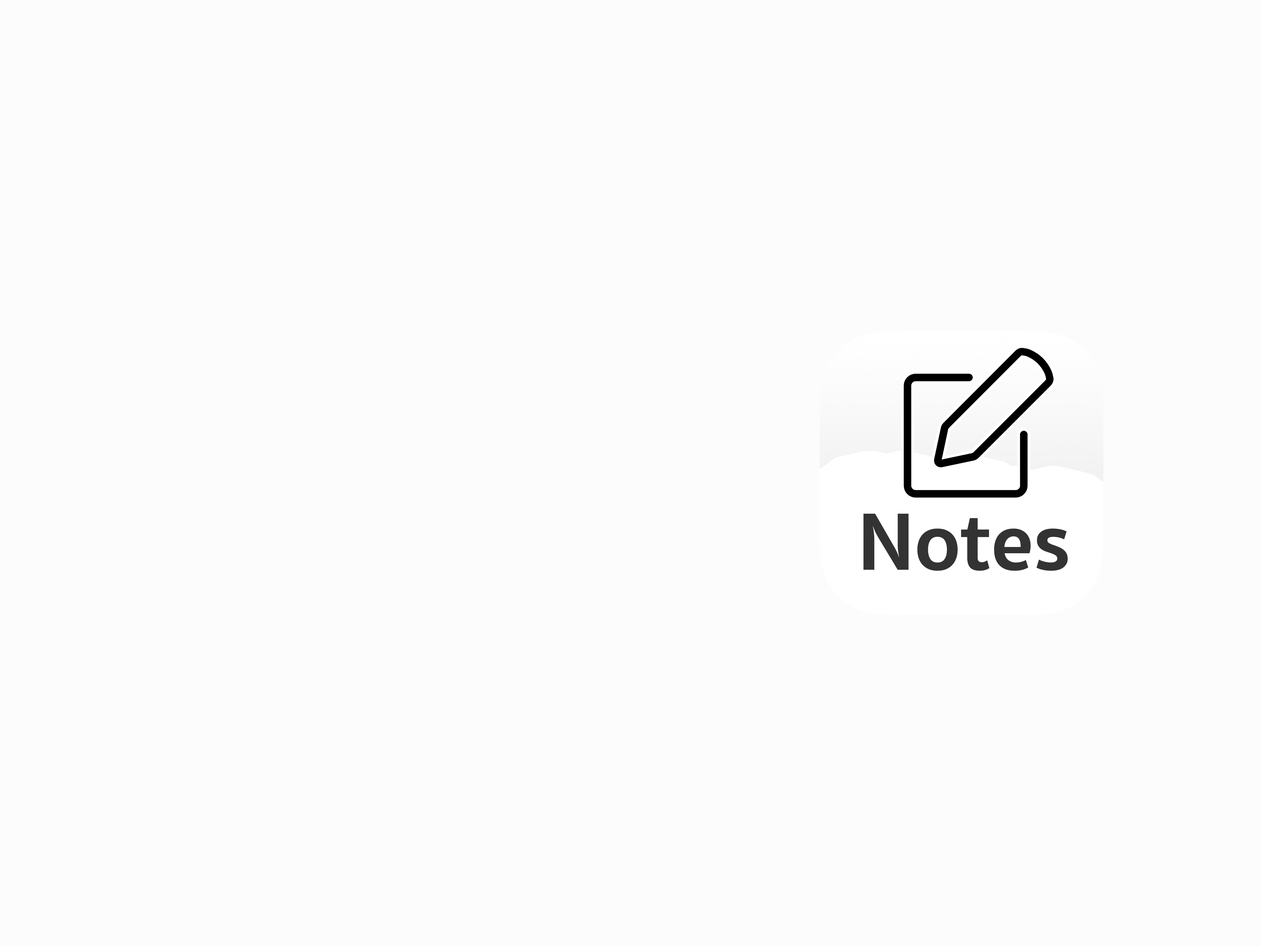
<style>
.page{position:relative;width:1261px;height:946px;background:#fcfcfc}
.page>*{position:absolute;margin:0}
.t1{font:83.1px "SukhumvitSet-Bold";color:#333333}
</style>
<div class="page">
<p class="t1" style="left:863px;top:513px;width:205px;height:58px">Notes</p>
</div>
